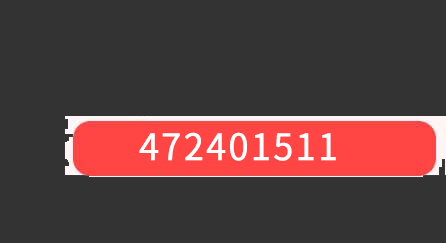
<style>
.page{position:relative;width:446px;height:243px;background:#333333}
.page>*{position:absolute;margin:0}
.t1{font:36px "SourceHanSansSC-Regular";letter-spacing:0.04em;color:#ffffff;font-weight:bold}
</style>
<div class="page">
<p class="t1" style="left:139px;top:132px;width:197px;height:29px">472401511</p>
</div>
